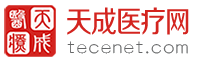
<style>
.page{position:relative;width:222px;height:60px;background:#ffffff}
.page>*{position:absolute;margin:0}
.t1{font:30px "FZZZHUNHJW--GB1-0";letter-spacing:-0.05em;color:#d3241f;scale:0.87 1}
.t2{font:15.9px "ç»å¸ç»åç®-regular";letter-spacing:0.085em;color:#656667;scale:1.06 1}
</style>
<div class="page">
<p class="t1" style="left:67px;top:7px;width:122px;height:28px">天成医疗网</p>
<p class="t2" style="left:67px;top:41px;width:121px;height:13px">tecenet.com</p>
</div>
